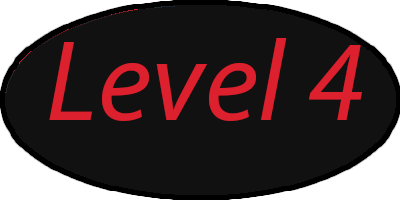
<style>
.page{position:relative;width:400px;height:200px;background:#111111}
.page>*{position:absolute;margin:0}
.t1{font:115.3px "MyriadPro-It";letter-spacing:0.01em;color:#dd202d}
</style>
<div class="page">
<p class="t1" style="left:49px;top:38px;width:313px;height:83px">Level 4</p>
</div>
